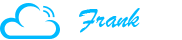
<style>
.page{position:relative;width:182px;height:40px;background:#ffffff}
.page>*{position:absolute;margin:0}
.t1{font:30px "STXingkai";color:#00baff}
</style>
<div class="page">
<p class="t1" style="left:79px;top:8px;width:61px;height:25px">Frank</p>
</div>
